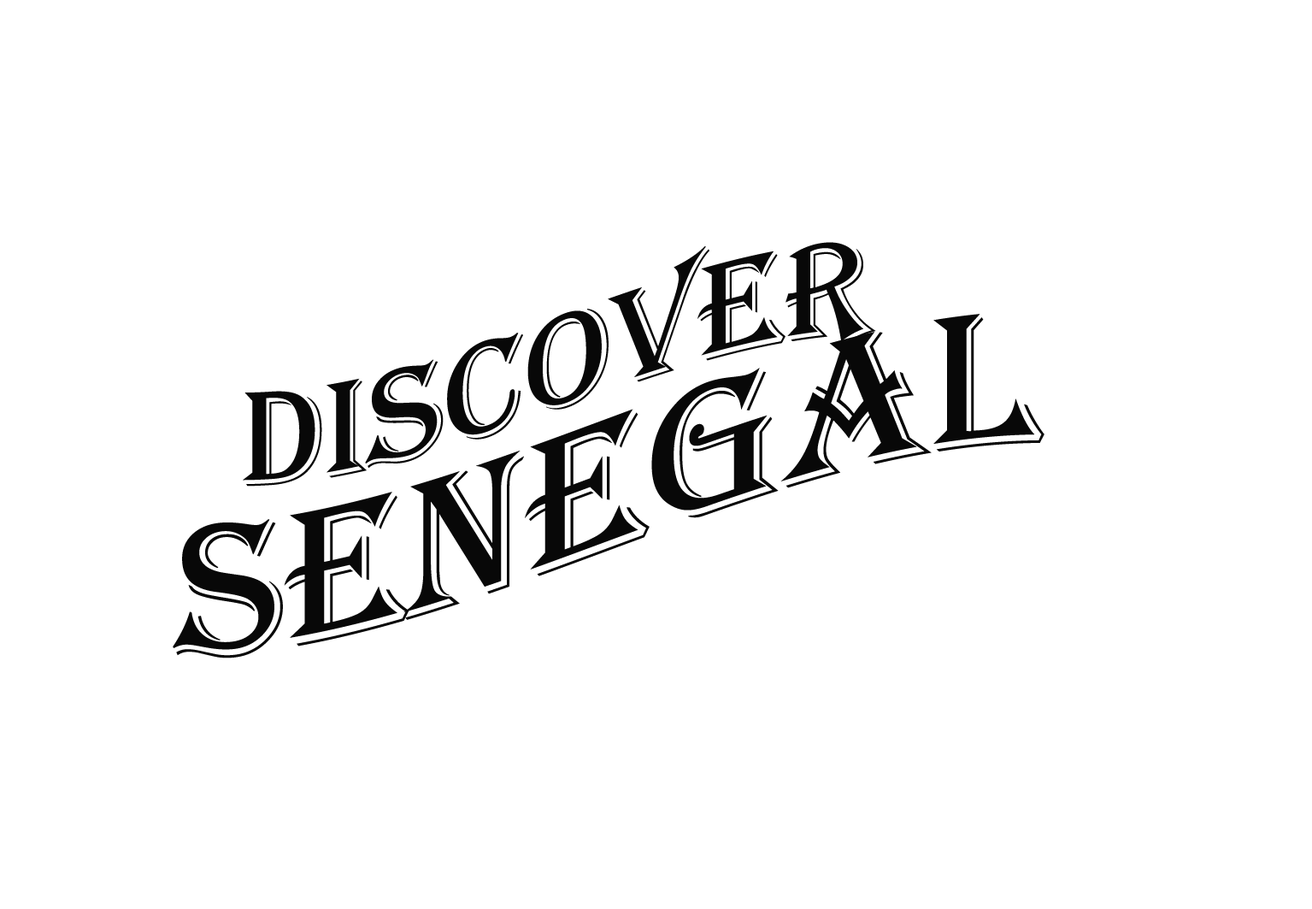
<style>
.page{position:relative;width:1312px;height:909px;background:#ffffff}
.page>*{position:absolute;margin:0}
.t1{font:138.9px/106.9px "Algerian";color:#0a0a0a;font-variant:small-caps}
.t2{font:196.8px/151.4px "Algerian";color:#0a0a0a;font-variant:small-caps}
</style>
<div class="page">
<p class="t1" style="left:243px;top:242px;width:633px;height:244px;text-align:center">DISCOVER</p>
<p class="t2" style="left:173px;top:314px;width:872px;height:344px;text-align:center">SENEGAL</p>
</div>
